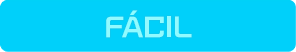
<style>
.page{position:relative;width:296px;height:52px;background:#00d0fa}
.page>*{position:absolute;margin:0}
.t1{font:24px "KafuTechnoStd-HV";letter-spacing:0.024em;color:#94f8ff}
</style>
<div class="page">
<p class="t1" style="left:106px;top:10px;width:86px;height:28px">FÁCIL</p>
</div>
